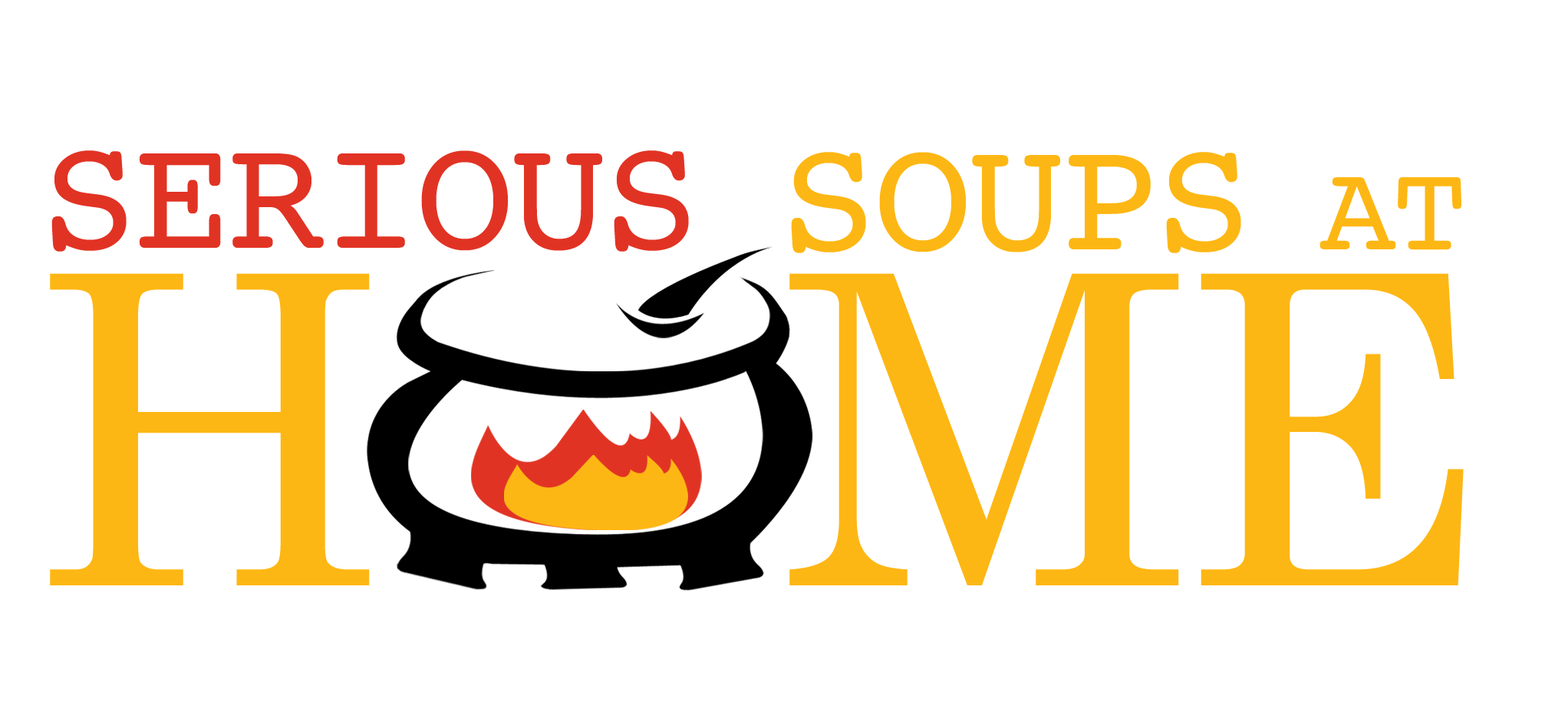
<style>
.page{position:relative;width:1568px;height:715px;background:#ffffff}
.page>*{position:absolute;margin:0}
.t1{font:163px "Courier";letter-spacing:-0.025em;color:#e13324}
.t2{font:163px "Courier";letter-spacing:-0.025em;color:#fdb714}
.t3{font:124.7px "Courier";letter-spacing:-0.025em;color:#fdb714}
.t4{font:431.5px "CenturySchoolbook";letter-spacing:-0.04em;color:#fdb714}
</style>
<div class="page">
<p class="t1" style="left:51px;top:150px;width:638px;height:102px">SERIOUS</p>
<p class="t2" style="left:791px;top:152px;width:670px;height:101px">SOUPS<span class="t3"> AT</span></p>
<p class="t4" style="left:50px;top:273px;width:1414px;height:312px">H    ME</p>
</div>
